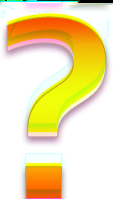
<style>
.page{position:relative;width:113px;height:199px;background:#ffffff}
.page>*{position:absolute;margin:0}
.t1{font:280px "Corbel-Bold"}
</style>
<div class="page">
<p class="t1" style="left:6px;top:2px;width:101px;height:187px">?</p>
</div>
